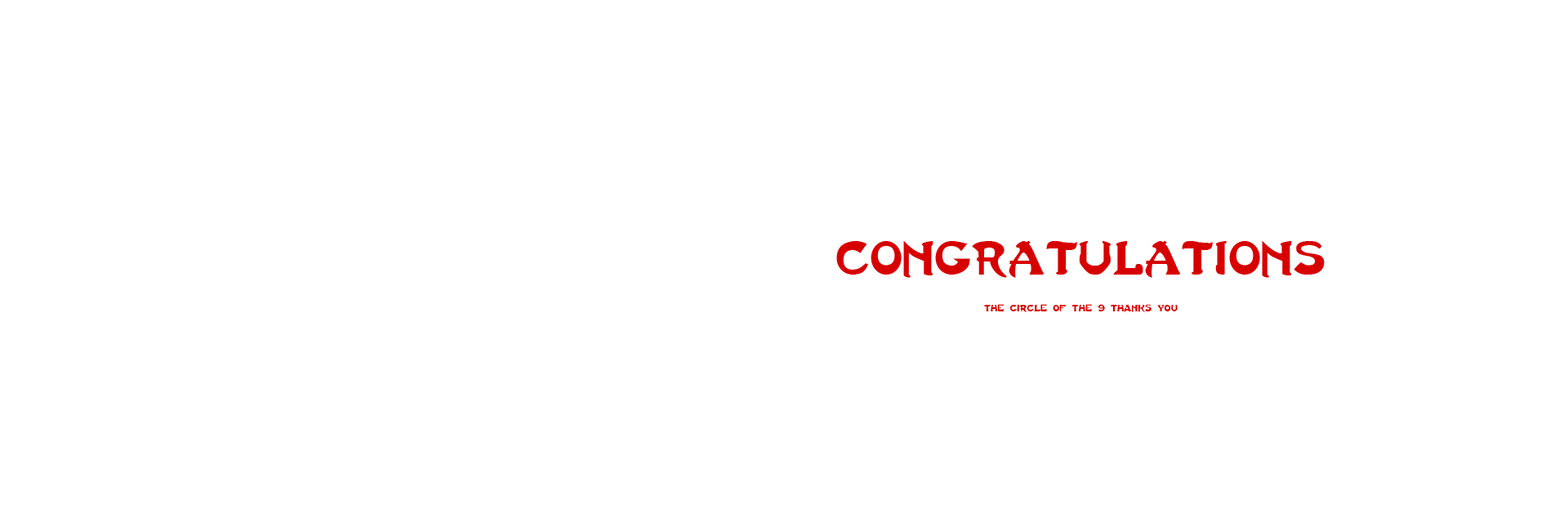
<style>
.page{position:relative;width:1568px;height:523px;background:#ffffff}
.page>*{position:absolute;margin:0}
.t1{font:36.9px "LastNinja";color:#d70000}
.t2{font:7.3px "LastNinja";color:#d70000}
</style>
<div class="page">
<p class="t1" style="left:836px;top:240px;width:489px;height:38px">CONGRATULATIONS</p>
<p class="t2" style="left:984px;top:304px;width:194px;height:8px">THE Circle OF the 9 THANKS YOU</p>
</div>
